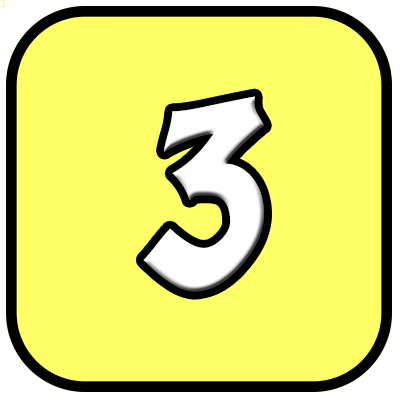
<style>
.page{position:relative;width:400px;height:400px;background:#ffff66}
.page>*{position:absolute;margin:0}
.t1{font:10.7px "LucidaConsole";color:#ffff66}
.t2{font:240px "Yikes";color:#fefefe}
</style>
<div class="page">
<p class="t1" style="left:0px;top:0px;width:7px;height:8px">1</p>
<p class="t2" style="left:143px;top:96px;width:121px;height:196px">3</p>
</div>
